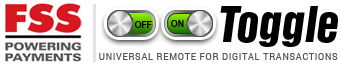
<style>
.page{position:relative;width:341px;height:67px;background:#ffffff}
.page>*{position:absolute;margin:0}
.t1{font:50.8px "HelveticaInseratBQ-Italic";color:#000000}
.t2{font:9px "Arial-BoldMT";letter-spacing:-0.01em;color:#000000;scale:0.96 1}
.t3{font:9px "Arial-BoldMT";letter-spacing:0.025em;color:#000000;scale:0.96 1}
.t4{font:9px "Roboto-Regular";letter-spacing:0.08em;color:#545456;text-transform:uppercase}
</style>
<div class="page">
<p class="t1" style="left:220px;top:6px;width:118px;height:41px">Toggle</p>
<p class="t2" style="left:134px;top:21px;width:18px;height:7px">OFF</p>
<p class="t3" style="left:171px;top:20px;width:13px;height:7px">ON</p>
<p class="t4" style="left:99px;top:53px;width:239px;height:7px">Universal Remote for Digital Transactions</p>
</div>
